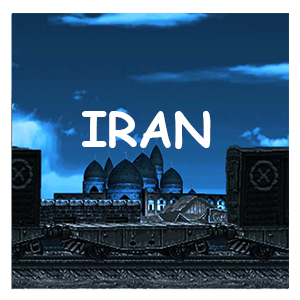
<style>
.page{position:relative;width:300px;height:300px}
.page>*{position:absolute;margin:0}
.t1{font:48px "ComicSansMS-Bold";color:#ffffff}
</style>
<div class="page">
<p class="t1" style="left:82px;top:111px;width:129px;height:38px">IRAN</p>
</div>
